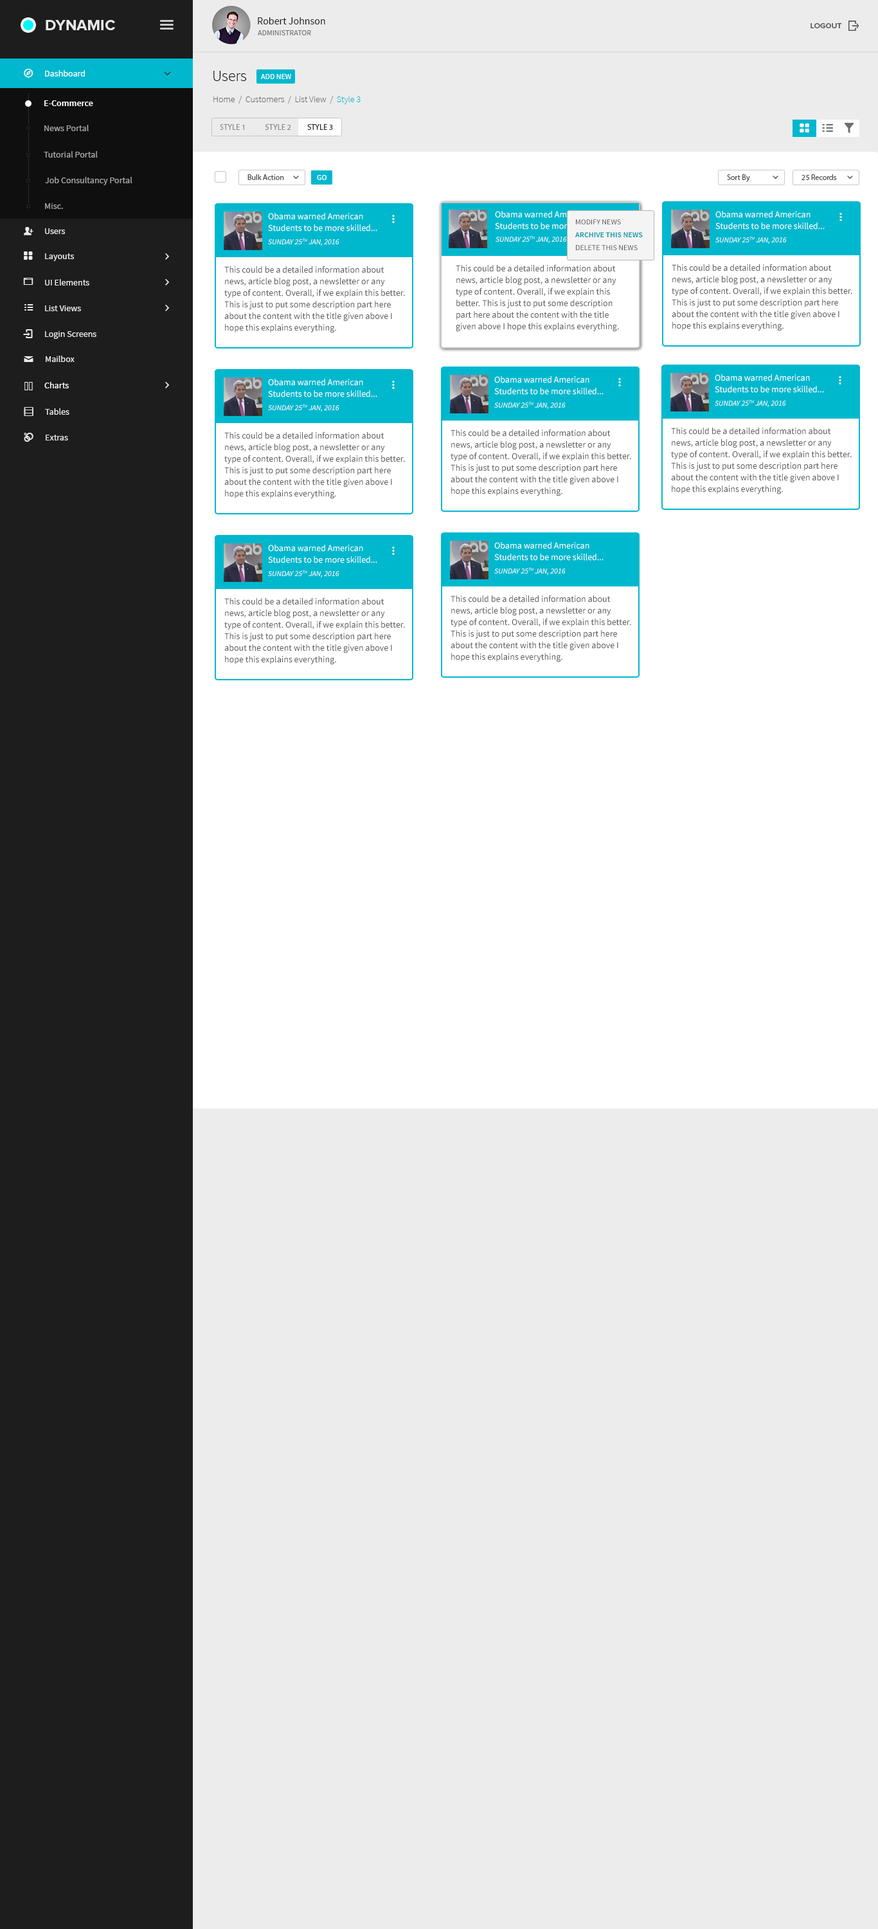
<style>
.page{position:relative;width:878px;height:1929px;background:#ececec}
.page>*{position:absolute;margin:0}
.t1{font:10.3px "SourceSansPro-Regular";color:#1d1d1d}
.t2{font:15.4px "ProximaNova-Bold";color:#eae7e7;text-transform:uppercase}
.t3{font:7.7px "ProximaNova-Semibold";color:#535353;font-variant:small-caps}
.t4{font:7.7px "SourceSansPro-Regular";color:#767575}
.t5{font:9px "SourceSansPro-Regular";color:#ffffff}
.t6{font:9px "SourceSansPro-Regular";color:#ffffff;font-variant:small-caps}
.t7{font:15.4px "SourceSansPro-Light";color:#010101}
.t8{font:7.7px "SourceSansPro-Regular";color:#ffffff;text-transform:uppercase}
.t9{font:9px "SourceSansPro-Semibold";color:#ffffff}
.t10{font:9px "SourceSansPro-Light";color:#6d6c6c}
.t11{font:9px "SourceSansPro-Light";color:#00b8ce}
.t12{font:9px "SourceSansPro-Regular";color:#a6a5a5}
.t13{font:7.7px "MyriadPro-Regular";color:#8f8f8f;text-transform:uppercase}
.t14{font:7.7px "MyriadPro-Regular";color:#8a8a8a;text-transform:uppercase}
.t15{font:7.7px "MyriadPro-Regular";color:#2b2b2b;text-transform:uppercase}
.t16{font:8.8px "SourceSansPro-Regular";color:#a6a5a5}
.t17{font:7.7px "MyriadPro-Regular";color:#4e4e4e}
.t18{font:9px/11.6px "SourceSansPro-Regular";color:#ffffff}
.t19{font:7.7px/12.9px "SourceSansPro-Semibold";color:#0097a9;text-transform:uppercase}
.t20{font:7.7px/12.9px "SourceSansPro-Regular";color:#565555;text-transform:uppercase}
.t21{font:9px "SourceSansPro-Regular";color:#ebebeb}
.t22{font:7.7px "SourceSansPro-It";color:#ffffff;text-transform:uppercase}
.t23{font:9px/11.6px "SourceSansPro-Regular";color:#565555}
.t24{font:8.8px "SourceSansPro-Regular";color:#ebebeb}
</style>
<div class="page">
<p class="t1" style="left:258px;top:17px;width:67px;height:7px">Robert Johnson</p>
<p class="t2" style="left:46px;top:20px;width:69px;height:10px">DYNAMIC</p>
<p class="t3" style="left:811px;top:23px;width:31px;height:5px">LOGOUT</p>
<p class="t4" style="left:257px;top:30px;width:54px;height:5px">ADMINISTRATOR</p>
<p class="t5" style="left:45px;top:70px;width:40px;height:6px"><span class="t6">D</span>ashboard</p>
<p class="t7" style="left:213px;top:71px;width:33px;height:10px">Users</p>
<p class="t8" style="left:260px;top:74px;width:31px;height:5px">add new</p>
<p class="t9" style="left:44px;top:100px;width:49px;height:6px">E-Commerce</p>
<p class="t10" style="left:213px;top:96px;width:148px;height:8px">Home  /  Customers  /  List View  /  <span class="t11">Style 3</span></p>
<p class="t12" style="left:44px;top:125px;width:45px;height:6px">News Portal</p>
<p class="t13" style="left:220px;top:124px;width:113px;height:6px">Style 1            <span class="t14">Style 2          </span><span class="t15">Style 3</span></p>
<p class="t16" style="left:44px;top:151px;width:54px;height:7px">Tutorial Portal</p>
<p class="t16" style="left:45px;top:177px;width:87px;height:8px">Job Consultancy Portal</p>
<p class="t17" style="left:248px;top:174px;width:36px;height:6px">Bulk Action</p>
<p class="t8" style="left:317px;top:175px;width:10px;height:5px">go</p>
<p class="t17" style="left:727px;top:174px;width:23px;height:8px">Sort By</p>
<p class="t17" style="left:802px;top:174px;width:35px;height:6px">25 Records</p>
<p class="t16" style="left:45px;top:203px;width:18px;height:6px">Misc.</p>
<p class="t18" style="left:268px;top:213px;width:109px;height:18px">Obama warned American <br>Students to be more skilled...</p>
<p class="t18" style="left:495px;top:211px;width:109px;height:19px">Obama warned American <br>Students to be more skilled...</p>
<p class="t19" style="left:575px;top:219px;width:68px;height:31px"><span class="t20">Modify News<br></span>Archive This News<br><span class="t20">Delete This News</span></p>
<p class="t18" style="left:716px;top:211px;width:109px;height:19px">Obama warned American <br>Students to be more skilled...</p>
<p class="t21" style="left:45px;top:228px;width:20px;height:6px">Users</p>
<p class="t22" style="left:268px;top:239px;width:71px;height:7px">SUNDAY 25TH jAN, 2016</p>
<p class="t22" style="left:496px;top:236px;width:71px;height:7px">SUNDAY 25TH jAN, 2016</p>
<p class="t22" style="left:716px;top:237px;width:71px;height:7px">SUNDAY 25TH jAN, 2016</p>
<p class="t21" style="left:45px;top:253px;width:29px;height:8px">Layouts</p>
<p class="t23" style="left:224px;top:266px;width:181px;height:67px">This could be a detailed information about <br>news, article blog post, a newsletter or any <br>type of content. Overall, if we explain this better. <br>This is just to put some description part here <br>about the content with the title given above I <br>hope this explains everything.</p>
<p class="t23" style="left:456px;top:264px;width:163px;height:68px">This could be a detailed information about <br>news, article blog post, a newsletter or any <br>type of content. Overall, if we explain this <br>better. This is just to put some description <br>part here about the content with the title <br>given above I hope this explains everything.</p>
<p class="t23" style="left:672px;top:264px;width:180px;height:67px">This could be a detailed information about <br>news, article blog post, a newsletter or any <br>type of content. Overall, if we explain this better. <br>This is just to put some description part here <br>about the content with the title given above I <br>hope this explains everything.</p>
<p class="t21" style="left:45px;top:279px;width:44px;height:6px">UI Elements</p>
<p class="t21" style="left:45px;top:305px;width:36px;height:6px">List Views</p>
<p class="t21" style="left:45px;top:331px;width:51px;height:8px">Login Screens</p>
<p class="t21" style="left:46px;top:356px;width:29px;height:6px">Mailbox</p>
<p class="t18" style="left:494px;top:376px;width:110px;height:19px">Obama warned American <br>Students to be more skilled...</p>
<p class="t18" style="left:715px;top:374px;width:109px;height:19px">Obama warned American <br>Students to be more skilled...</p>
<p class="t5" style="left:44px;top:382px;width:25px;height:6px">Charts</p>
<p class="t18" style="left:268px;top:379px;width:109px;height:18px">Obama warned American <br>Students to be more skilled...</p>
<p class="t22" style="left:494px;top:402px;width:72px;height:7px">SUNDAY 25TH jAN, 2016</p>
<p class="t22" style="left:715px;top:400px;width:71px;height:7px">SUNDAY 25TH jAN, 2016</p>
<p class="t24" style="left:45px;top:408px;width:24px;height:7px">Tables</p>
<p class="t22" style="left:268px;top:404px;width:71px;height:7px">SUNDAY 25TH jAN, 2016</p>
<p class="t24" style="left:46px;top:435px;width:22px;height:5px">Extras</p>
<p class="t23" style="left:224px;top:431px;width:181px;height:68px">This could be a detailed information about <br>news, article blog post, a newsletter or any <br>type of content. Overall, if we explain this better. <br>This is just to put some description part here <br>about the content with the title given above I <br>hope this explains everything.</p>
<p class="t23" style="left:451px;top:429px;width:180px;height:67px">This could be a detailed information about <br>news, article blog post, a newsletter or any <br>type of content. Overall, if we explain this better. <br>This is just to put some description part here <br>about the content with the title given above I <br>hope this explains everything.</p>
<p class="t23" style="left:671px;top:427px;width:181px;height:67px">This could be a detailed information about <br>news, article blog post, a newsletter or any <br>type of content. Overall, if we explain this better. <br>This is just to put some description part here <br>about the content with the title given above I <br>hope this explains everything.</p>
<p class="t18" style="left:268px;top:544px;width:109px;height:19px">Obama warned American <br>Students to be more skilled...</p>
<p class="t18" style="left:494px;top:542px;width:110px;height:19px">Obama warned American <br>Students to be more skilled...</p>
<p class="t22" style="left:494px;top:568px;width:72px;height:7px">SUNDAY 25TH jAN, 2016</p>
<p class="t22" style="left:268px;top:570px;width:71px;height:7px">SUNDAY 25TH jAN, 2016</p>
<p class="t23" style="left:224px;top:597px;width:181px;height:68px">This could be a detailed information about <br>news, article blog post, a newsletter or any <br>type of content. Overall, if we explain this better. <br>This is just to put some description part here <br>about the content with the title given above I <br>hope this explains everything.</p>
<p class="t23" style="left:451px;top:595px;width:180px;height:67px">This could be a detailed information about <br>news, article blog post, a newsletter or any <br>type of content. Overall, if we explain this better. <br>This is just to put some description part here <br>about the content with the title given above I <br>hope this explains everything.</p>
</div>
